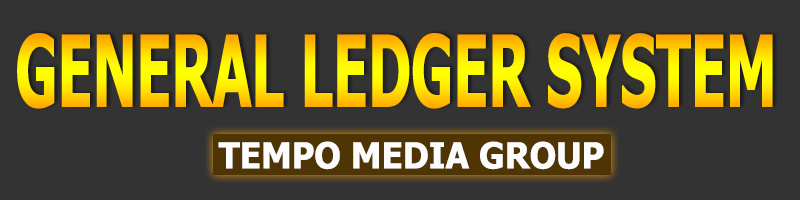
<style>
.page{position:relative;width:800px;height:200px;background:#333333}
.page>*{position:absolute;margin:0}
.t1{font:99.6px "Tahoma-Bold";scale:0.57 1}
.t2{font:36.1px "Tahoma-Bold";color:#fefdfd;scale:0.95 1}
</style>
<div class="page">
<p class="t1" style="left:17px;top:33px;width:756px;height:76px">GENERAL LEDGER SYSTEM</p>
<p class="t2" style="left:218px;top:141px;width:386px;height:29px">TEMPO MEDIA GROUP</p>
</div>
